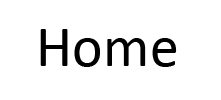
<style>
.page{position:relative;width:221px;height:100px;background:#ffffff}
.page>*{position:absolute;margin:0}
.t1{font:58.3px "Calibri";color:#000000}
</style>
<div class="page">
<p class="t1" style="left:40px;top:29px;width:137px;height:38px">Home</p>
</div>
